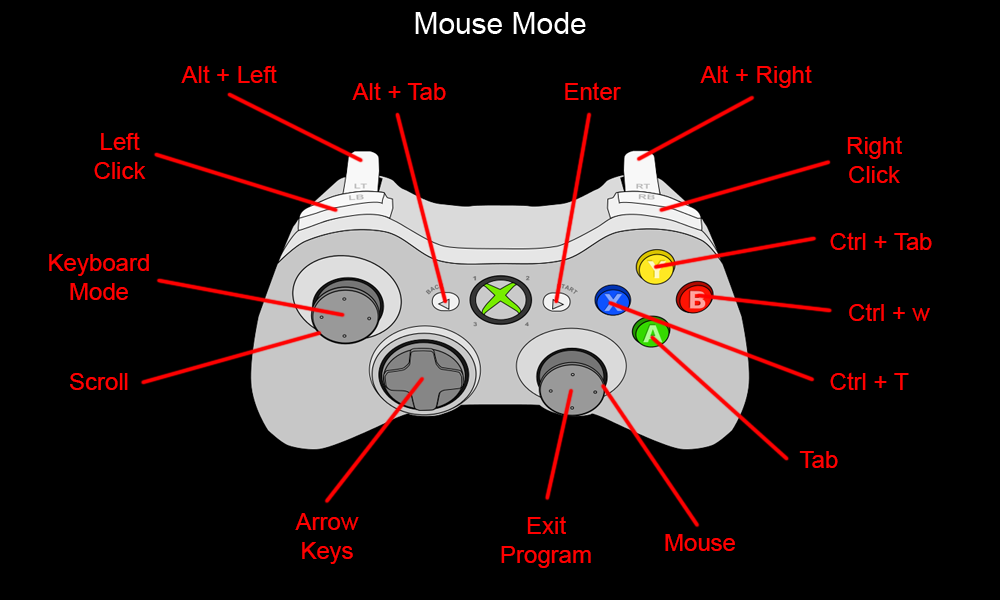
<style>
.page{position:relative;width:1000px;height:600px;background:#000000}
.page>*{position:absolute;margin:0}
.t1{font:24px "ArialMT";color:#ff0000}
.t2{font:23.8px "ArialMT";color:#ff0000}
.t3{font:23.9px "ArialMT";color:#ff0000}
</style>
<div class="page">
<p class="t1" style="left:181px;top:65px;width:96px;height:18px">Alt + Left</p>
<p class="t1" style="left:700px;top:65px;width:112px;height:23px">Alt + Right</p>
<p class="t1" style="left:352px;top:82px;width:94px;height:18px">Alt + Tab</p>
<p class="t1" style="left:565px;top:82px;width:56px;height:18px">Enter</p>
<p class="t1" style="left:94px;top:132px;width:52px;height:47px;text-align:center">Left<br>Click</p>
<p class="t1" style="left:847px;top:136px;width:55px;height:47px;text-align:center">Right<br>Click</p>
<p class="t1" style="left:830px;top:232px;width:102px;height:18px">Ctrl + Tab</p>
<p class="t1" style="left:49px;top:254px;width:100px;height:46px;text-align:center">Keyboard<br>Mode</p>
<p class="t1" style="left:849px;top:303px;width:81px;height:18px">Ctrl + w</p>
<p class="t2" style="left:70px;top:373px;width:58px;height:17px">Scroll</p>
<p class="t1" style="left:830px;top:372px;width:79px;height:18px">Ctrl + T</p>
<p class="t3" style="left:799px;top:451px;width:39px;height:17px">Tab</p>
<p class="t1" style="left:295px;top:513px;width:64px;height:51px;text-align:center">Arrow<br>Keys</p>
<p class="t1" style="left:501px;top:516px;width:90px;height:52px;text-align:center">Exit<br>Program</p>
<p class="t1" style="left:665px;top:534px;width:70px;height:17px">Mouse</p>
</div>
